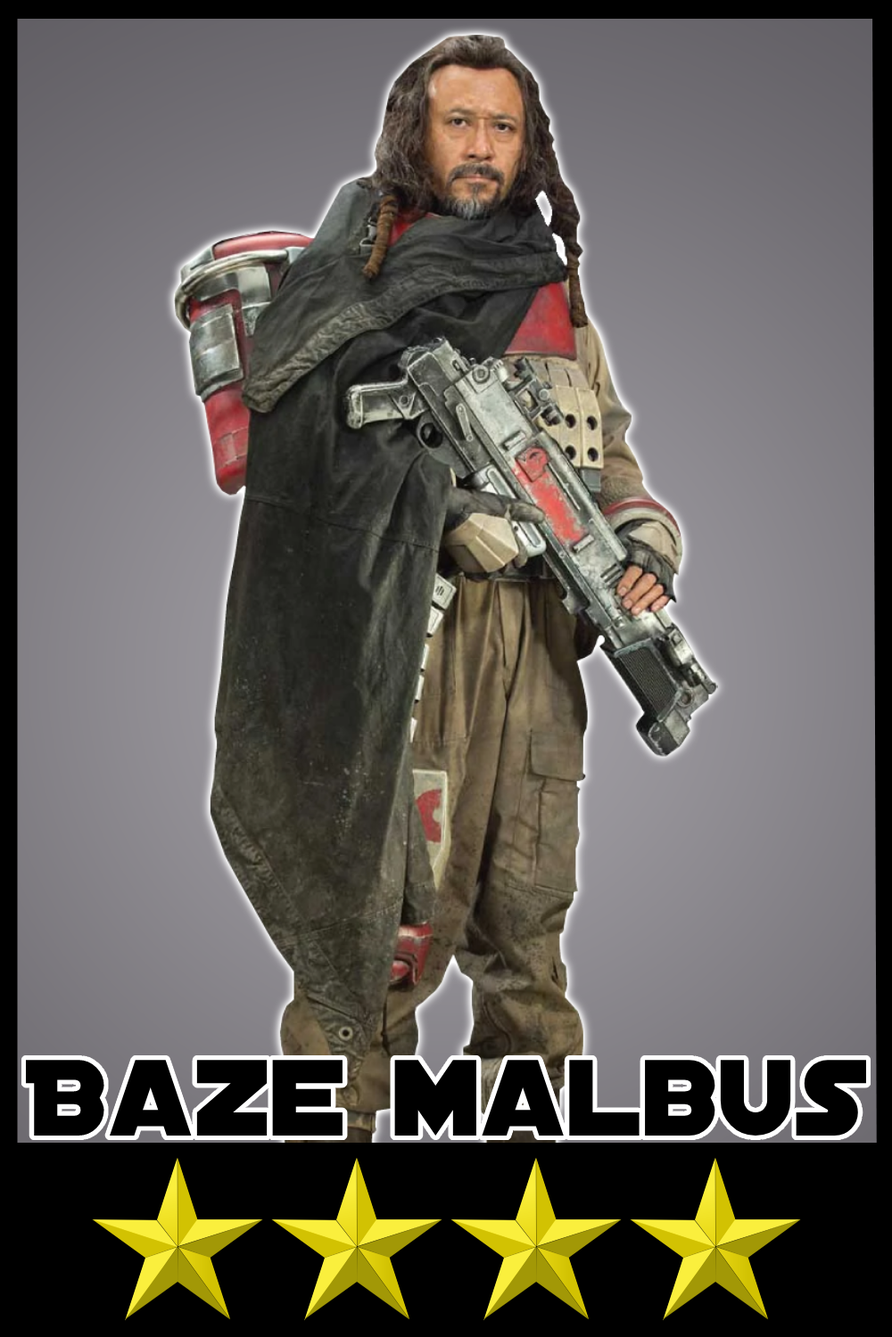
<style>
.page{position:relative;width:892px;height:1337px}
.page>*{position:absolute;margin:0}
.t1{font:116.3px "DistantGalaxy";color:#000000}
</style>
<div class="page">
<p class="t1" style="left:26px;top:1060px;width:840px;height:76px">Baze malbus</p>
</div>
